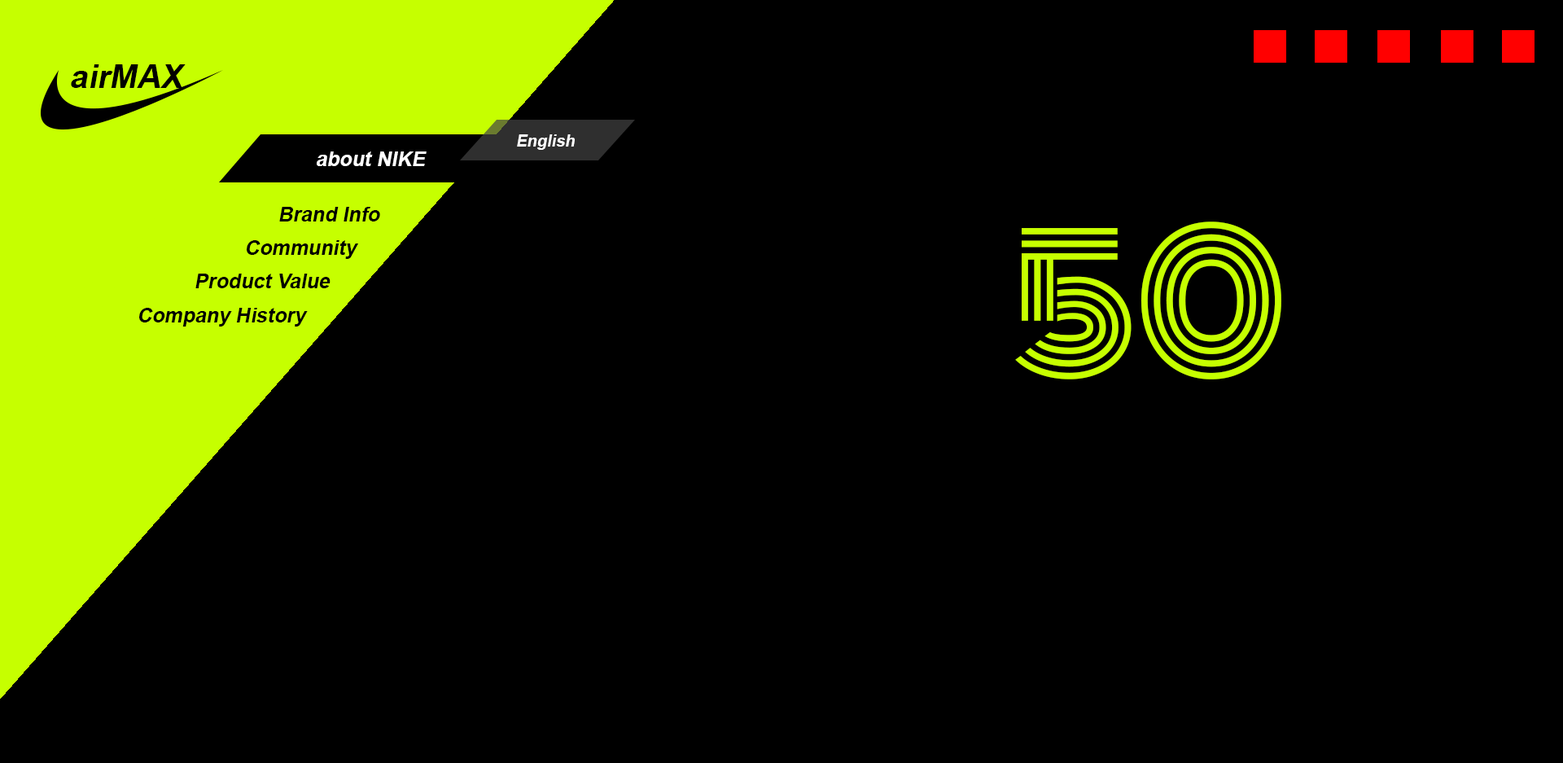
<style>
.page{position:relative;width:1563px;height:763px;background:#000000}
.page>*{position:absolute;margin:0}
.t1{font:32.6px "Arial-BoldMT";color:#000000;font-style:italic}
.t2{font:16.3px "Arial-BoldMT";color:#ffffff;font-style:italic}
.t3{font:20.4px "Arial-BoldMT";color:#ffffff;font-style:italic}
.t4{font:20.4px "Arial-BoldMT";color:#000000;font-style:italic}
.t5{font:179.1px "Monoton-Regular";color:#c6ff00}
</style>
<div class="page">
<p class="t1" style="left:71px;top:64px;width:115px;height:24px">airMAX</p>
<p class="t2" style="left:517px;top:134px;width:58px;height:16px">English</p>
<p class="t3" style="left:317px;top:151px;width:110px;height:15px">about NIKE</p>
<p class="t4" style="left:279px;top:207px;width:101px;height:14px">Brand Info</p>
<p class="t5" style="left:1015px;top:221px;width:266px;height:158px">50</p>
<p class="t4" style="left:247px;top:240px;width:111px;height:19px">Community</p>
<p class="t4" style="left:195px;top:274px;width:136px;height:14px">Product Value</p>
<p class="t4" style="left:139px;top:308px;width:169px;height:18px">Company History</p>
</div>
